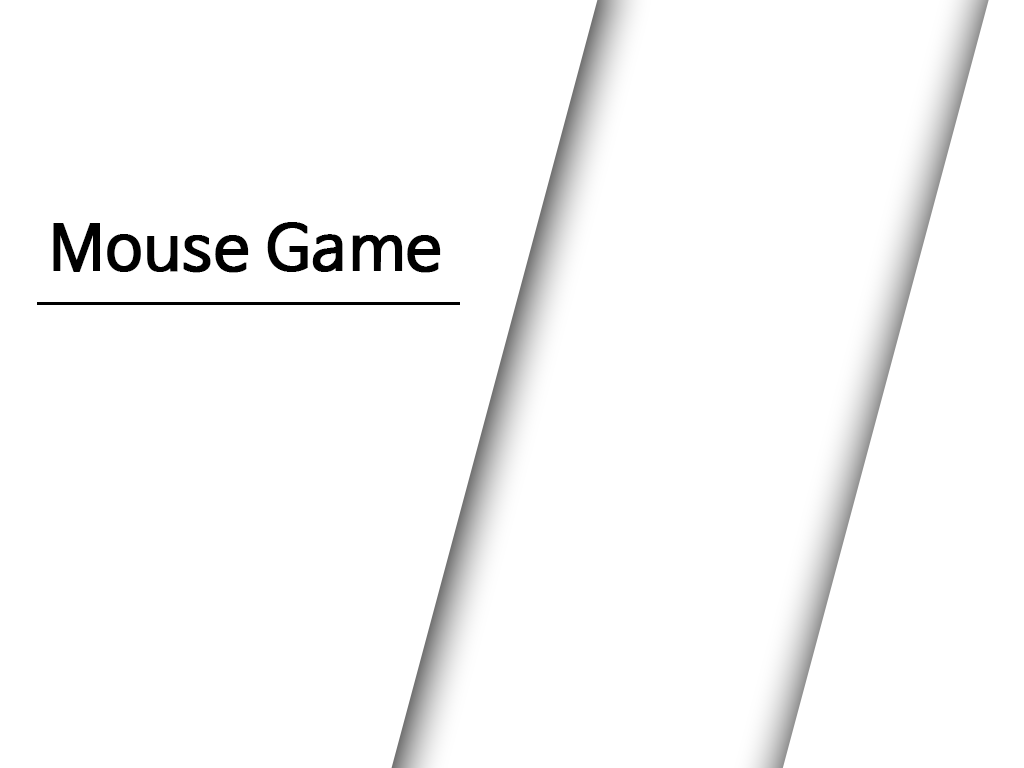
<style>
.page{position:relative;width:1024px;height:768px;background:#ffffff}
.page>*{position:absolute;margin:0}
.t1{font:62.5px "NanumBarunGothic";color:#000000;font-weight:bold}
</style>
<div class="page">
<p class="t1" style="left:53px;top:222px;width:388px;height:51px">Mouse Game</p>
</div>
